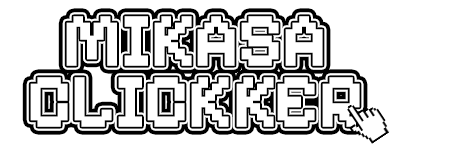
<style>
.page{position:relative;width:450px;height:150px;background:#ffffff}
.page>*{position:absolute;margin:0}
.t1{font:76.5px/61.1px "PixelifySans-Bold";letter-spacing:-0.025em;color:#ffffff}
</style>
<div class="page">
<p class="t1" style="left:30px;top:16px;width:330px;height:111px;text-align:center">MIKASA <br>CLICKKER</p>
</div>
